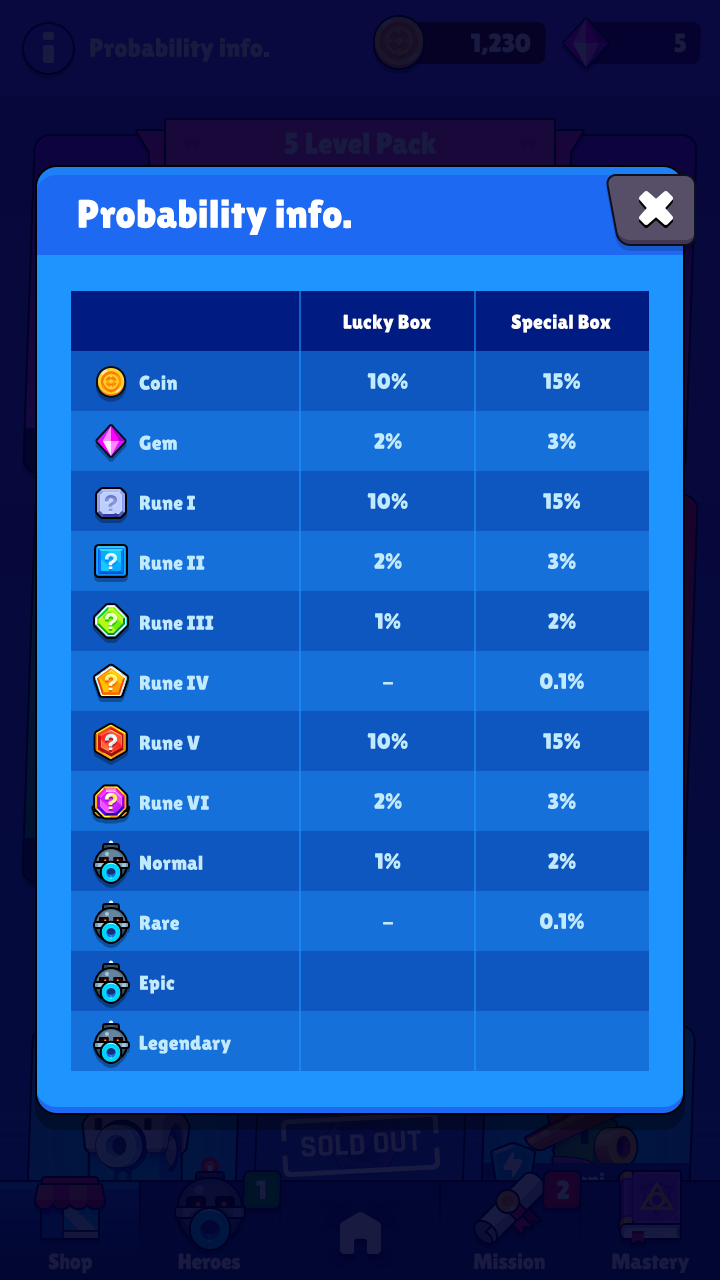
<style>
.page{position:relative;width:720px;height:1280px;background:#0f57c0}
.page>*{position:absolute;margin:0}
.t1{font:40px "LilitaOne";color:#ffffff}
.t2{font:20px "LilitaOne";color:#ffffff}
.t3{font:20px/60px "LilitaOne";color:#c0ebff}
.t4{font:22px/60px "LilitaOne";color:#c0ebff}
</style>
<div class="page">
<p class="t1" style="left:78px;top:199px;width:273px;height:36px">Probability info.</p>
<p class="t2" style="left:343px;top:314px;width:88px;height:19px">Lucky Box</p>
<p class="t2" style="left:511px;top:314px;width:100px;height:19px">Special Box</p>
<p class="t3" style="left:139px;top:375px;width:92px;height:679px">Coin <br>Gem<br>Rune I<br>Rune II<br>Rune III<br>Rune IV<br>Rune V<br>Rune VI<br>Normal<br>Rare<br>Epic<br>Legendary</p>
<p class="t4" style="left:367px;top:373px;width:41px;height:552px;text-align:center">10%<br>2%<br>10%<br>2%<br>1%<br>-<br>10%<br>2%<br>1%<br>-</p>
<p class="t4" style="left:540px;top:373px;width:44px;height:556px;text-align:center">15%<br>3%<br>15%<br>3%<br>2%<br>0.1%<br>15%<br>3%<br>2%<br>0.1%</p>
</div>
